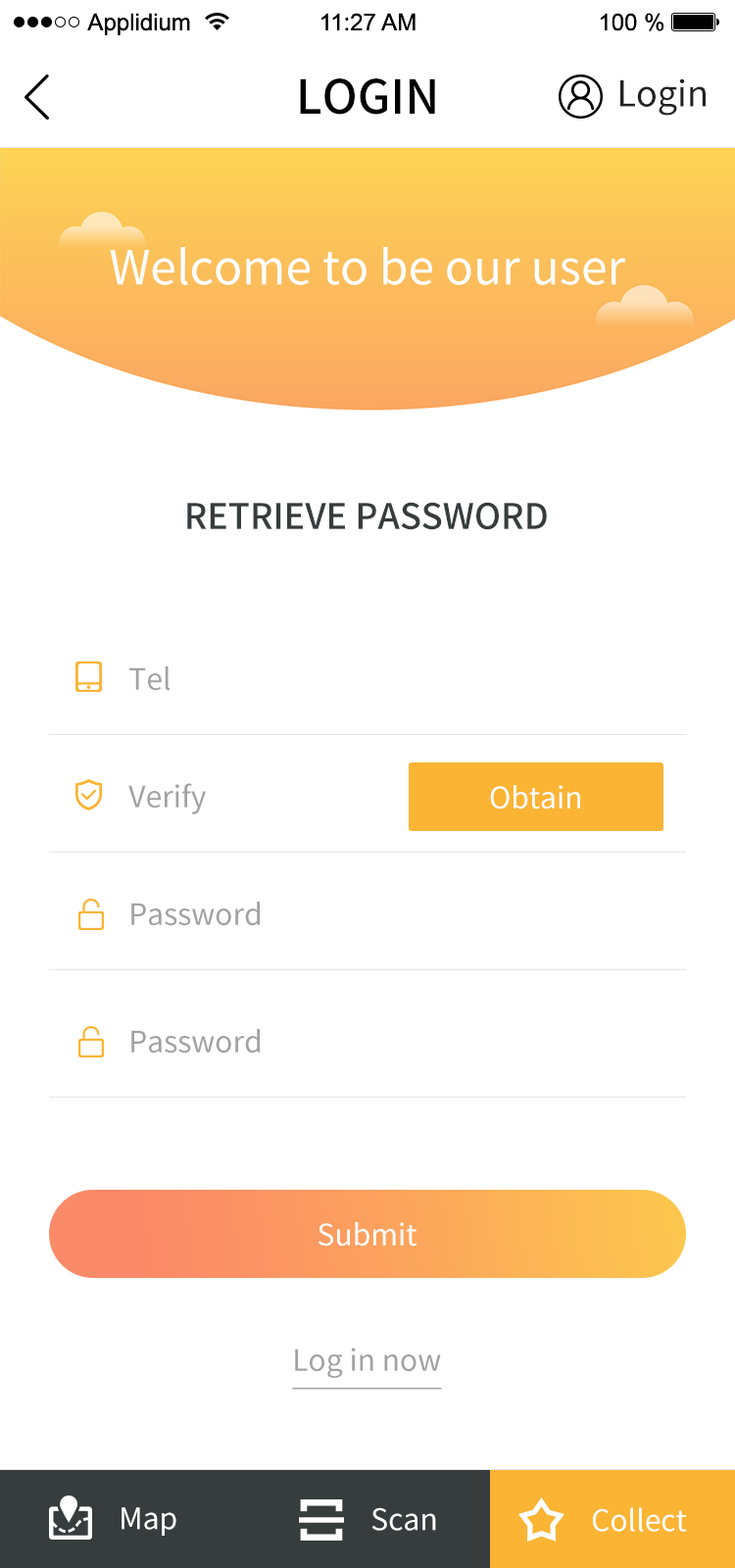
<style>
.page{position:relative;width:735px;height:1568px;background:#ffffff}
.page>*{position:absolute;margin:0}
.t1{font:47px "SourceHanSansCN-Medium";color:#010101;text-transform:uppercase}
.t2{font:35.3px "SourceHanSansCN-Regular";color:#222222}
.t3{font:47px "SourceHanSansCN-Regular";color:#ffffff}
.t4{font:35.3px "SourceHanSansCN-Medium";color:#373c3d;text-transform:uppercase}
.t5{font:29.4px "SourceHanSansCN-Regular";color:#a1a1a1}
.t6{font:29.4px "SourceHanSansCN-Regular";color:#ffffff}
.t7{font:29.4px "SourceHanSansCN-Regular";color:#a1a1a1;text-decoration:underline}
</style>
<div class="page">
<p class="t1" style="left:300px;top:78px;width:135px;height:37px">login</p>
<p class="t2" style="left:620px;top:78px;width:86px;height:38px">Login</p>
<p class="t3" style="left:110px;top:247px;width:516px;height:38px">Welcome to be our user</p>
<p class="t4" style="left:187px;top:502px;width:360px;height:28px">Retrieve password</p>
<p class="t5" style="left:129px;top:666px;width:42px;height:25px">Tel</p>
<p class="t5" style="left:128px;top:783px;width:78px;height:31px">Verify</p>
<p class="t6" style="left:490px;top:785px;width:90px;height:24px">Obtain</p>
<p class="t5" style="left:131px;top:902px;width:129px;height:24px">Password</p>
<p class="t5" style="left:131px;top:1029px;width:129px;height:25px">Password</p>
<p class="t6" style="left:318px;top:1222px;width:99px;height:25px">Submit</p>
<p class="t7" style="left:292px;top:1348px;width:150px;height:42px">Log in now</p>
<p class="t6" style="left:122px;top:1507px;width:54px;height:29px">Map</p>
<p class="t6" style="left:371px;top:1507px;width:65px;height:24px">Scan</p>
<p class="t6" style="left:593px;top:1507px;width:94px;height:25px">Collect</p>
</div>
